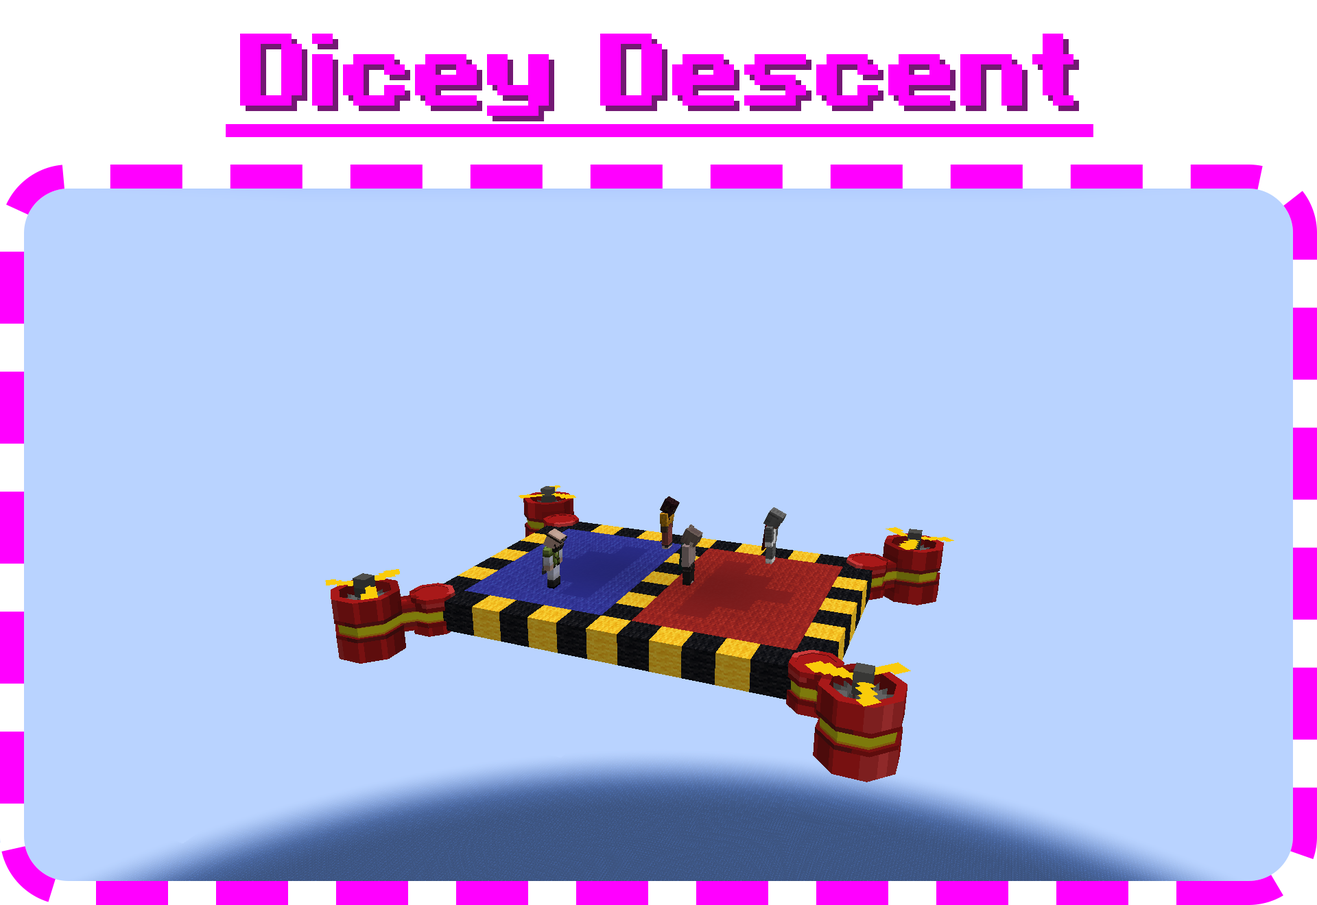
<style>
.page{position:relative;width:1317px;height:905px;background:#b9d3ff}
.page>*{position:absolute;margin:0}
.t1{font:102.9px "Minecraft-Bold";color:#ff00ff}
</style>
<div class="page">
<p class="t1" style="left:240px;top:34px;width:833px;height:82px">Dicey Descent</p>
</div>
